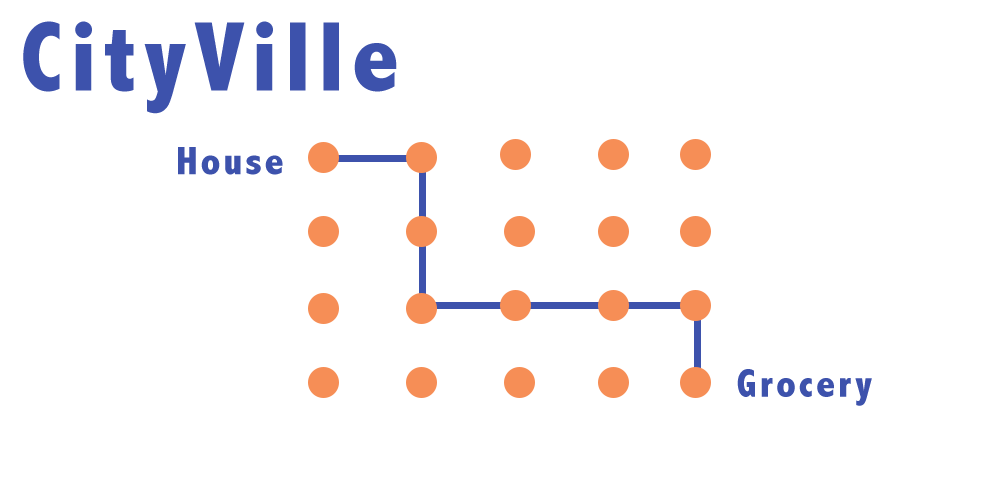
<style>
.page{position:relative;width:1000px;height:500px;background:#ffffff}
.page>*{position:absolute;margin:0}
.t1{font:100px "AbadiMT-CondensedExtraBold";letter-spacing:0.075em;color:#3d52ac}
.t2{font:40px "AbadiMT-CondensedExtraBold";letter-spacing:0.075em;color:#3d52ac}
</style>
<div class="page">
<p class="t1" style="left:23px;top:21px;width:374px;height:93px">CityVille</p>
<p class="t2" style="left:178px;top:147px;width:105px;height:28px">House</p>
<p class="t2" style="left:737px;top:369px;width:135px;height:37px">Grocery</p>
</div>
